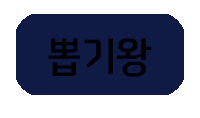
<style>
.page{position:relative;width:200px;height:118px;background:#0f1a45}
.page>*{position:absolute;margin:0}
.t1{font:41.7px "NEXONFootballGothicL";color:#000000}
</style>
<div class="page">
<p class="t1" style="left:48px;top:38px;width:104px;height:39px">뽑기왕</p>
</div>
